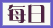
<style>
.page{position:relative;width:53px;height:28px;background:#f9faf3}
.page>*{position:absolute;margin:0}
.t1{font:20px "DFYaSongW9";color:#4d2241}
</style>
<div class="page">
<p class="t1" style="left:7px;top:4px;width:38px;height:19px">每日</p>
</div>
